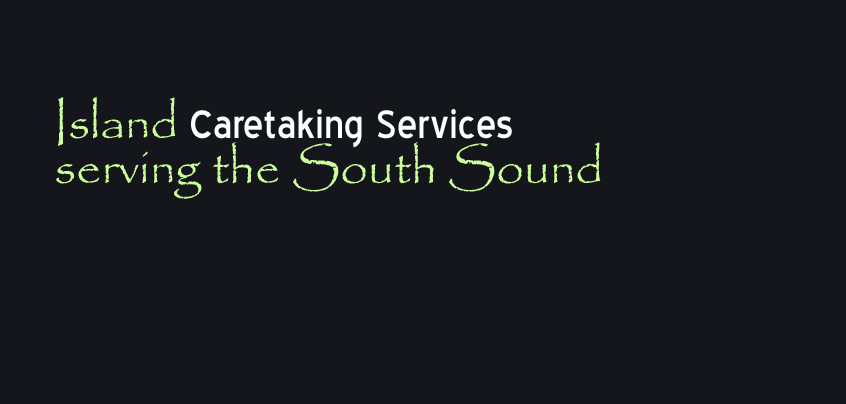
<style>
.page{position:relative;width:846px;height:404px;background:#15151c}
.page>*{position:absolute;margin:0}
.t1{font:49.8px/15px "Papyrus-Regular";color:#ccff99}
.t2{font:49.8px/15px "BlueHighway";color:#fbfffd}
</style>
<div class="page">
<p class="t1" style="left:56px;top:97px;width:545px;height:102px">Island <span class="t2">Caretaking Services<br></span><br><br>serving the South Sound</p>
</div>
